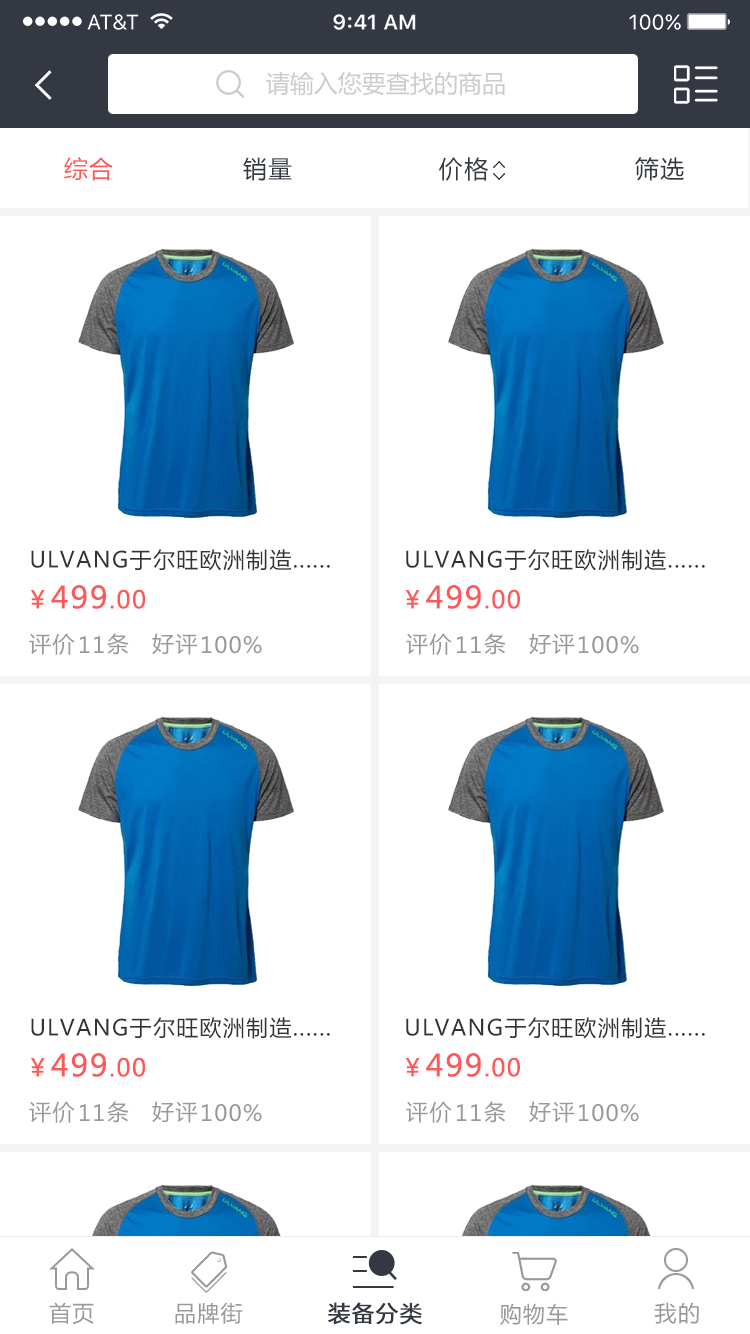
<style>
.page{position:relative;width:750px;height:1334px;background:#ffffff}
.page>*{position:absolute;margin:0}
.t1{font:24px "MicrosoftYaHei";color:#cccccc}
.t2{font:24px "MicrosoftYaHei";letter-spacing:0.06em;color:#343843}
.t3{font:24px "MicrosoftYaHei";letter-spacing:0.06em;color:#ff5858}
.t4{font:22px "MicrosoftYaHei";letter-spacing:0.06em;color:#333333}
.t5{font:30px "MicrosoftYaHei";letter-spacing:0.06em;color:#ff5858}
.t6{font:22px "MicrosoftYaHei";letter-spacing:0.06em;color:#999999}
.t7{font:22px "MicrosoftYaHei";letter-spacing:0.06em;color:#343843;font-weight:bold}
</style>
<div class="page">
<p class="t1" style="left:266px;top:72px;width:239px;height:24px">请输入您要查找的商品</p>
<p class="t2" style="left:64px;top:157px;width:620px;height:24px"><span class="t3">综合</span>               销量                 价格                 筛选</p>
<p class="t4" style="left:31px;top:549px;width:299px;height:22px">ULVANG于尔旺欧洲制造......</p>
<p class="t4" style="left:406px;top:549px;width:299px;height:22px">ULVANG于尔旺欧洲制造......</p>
<p class="t5" style="left:31px;top:585px;width:114px;height:24px"><span class="t3">￥</span>499<span class="t3">.00</span></p>
<p class="t5" style="left:405px;top:585px;width:115px;height:24px"><span class="t3">￥</span>499<span class="t3">.00</span></p>
<p class="t6" style="left:29px;top:633px;width:100px;height:22px">评价    条</p>
<p class="t6" style="left:80px;top:636px;width:24px;height:17px">11</p>
<p class="t6" style="left:152px;top:633px;width:46px;height:22px">好评</p>
<p class="t6" style="left:202px;top:636px;width:60px;height:18px">100%</p>
<p class="t6" style="left:406px;top:633px;width:100px;height:22px">评价    条</p>
<p class="t6" style="left:457px;top:636px;width:24px;height:17px">11</p>
<p class="t6" style="left:529px;top:633px;width:46px;height:22px">好评</p>
<p class="t6" style="left:579px;top:636px;width:60px;height:18px">100%</p>
<p class="t4" style="left:31px;top:1017px;width:299px;height:22px">ULVANG于尔旺欧洲制造......</p>
<p class="t4" style="left:406px;top:1017px;width:299px;height:22px">ULVANG于尔旺欧洲制造......</p>
<p class="t5" style="left:31px;top:1053px;width:114px;height:24px"><span class="t3">￥</span>499<span class="t3">.00</span></p>
<p class="t5" style="left:405px;top:1053px;width:115px;height:24px"><span class="t3">￥</span>499<span class="t3">.00</span></p>
<p class="t6" style="left:29px;top:1101px;width:100px;height:22px">评价    条</p>
<p class="t6" style="left:80px;top:1104px;width:24px;height:17px">11</p>
<p class="t6" style="left:152px;top:1101px;width:46px;height:22px">好评</p>
<p class="t6" style="left:202px;top:1104px;width:60px;height:18px">100%</p>
<p class="t6" style="left:406px;top:1101px;width:100px;height:22px">评价    条</p>
<p class="t6" style="left:457px;top:1104px;width:24px;height:17px">11</p>
<p class="t6" style="left:529px;top:1101px;width:46px;height:22px">好评</p>
<p class="t6" style="left:579px;top:1104px;width:60px;height:18px">100%</p>
<p class="t6" style="left:49px;top:1302px;width:45px;height:22px">首页</p>
<p class="t6" style="left:175px;top:1302px;width:68px;height:22px">品牌街</p>
<p class="t7" style="left:328px;top:1302px;width:94px;height:23px">装备分类</p>
<p class="t6" style="left:654px;top:1302px;width:45px;height:22px">我的</p>
<p class="t6" style="left:500px;top:1303px;width:68px;height:22px">购物车</p>
</div>
